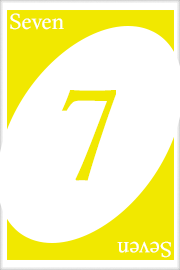
<style>
.page{position:relative;width:180px;height:270px;background:#ffffff}
.page>*{position:absolute;margin:0}
.t1{font:22px "CalistoMT";color:#ffffff}
.t2{font:128px "CalistoMT";color:#f1e800}
.t3{font:21.7px "CalistoMT";color:#ffffff}
</style>
<div class="page">
<p class="t1" style="left:10px;top:13px;width:54px;height:17px">Seven</p>
<p class="t2" style="left:61px;top:90px;width:55px;height:91px">7</p>
<p class="t3" style="left:117px;top:241px;width:54px;height:17px;rotate:180deg">Seven</p>
</div>
